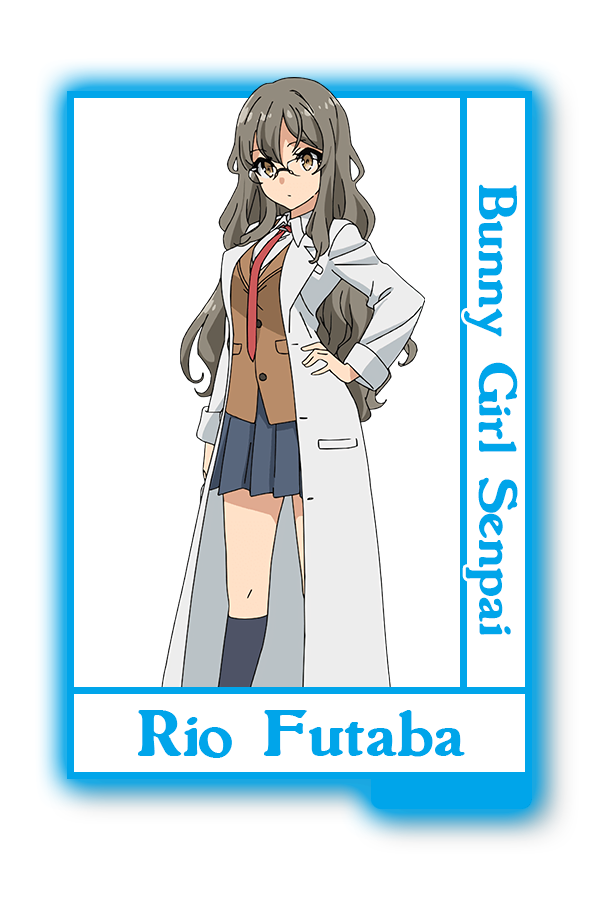
<style>
.page{position:relative;width:600px;height:900px;background:#ffffff}
.page>*{position:absolute;margin:0}
.t1{font:48.8px "Grantham-Bold";color:#0ba3e1}
.t2{font:60.3px "Grantham-Bold";color:#0ba3e1}
</style>
<div class="page">
<p class="t1" style="left:464px;top:184px;width:54px;height:451px;rotate:90deg">Bunny Girl Senpai</p>
<p class="t2" style="left:138px;top:710px;width:327px;height:48px">Rio Futaba</p>
</div>
